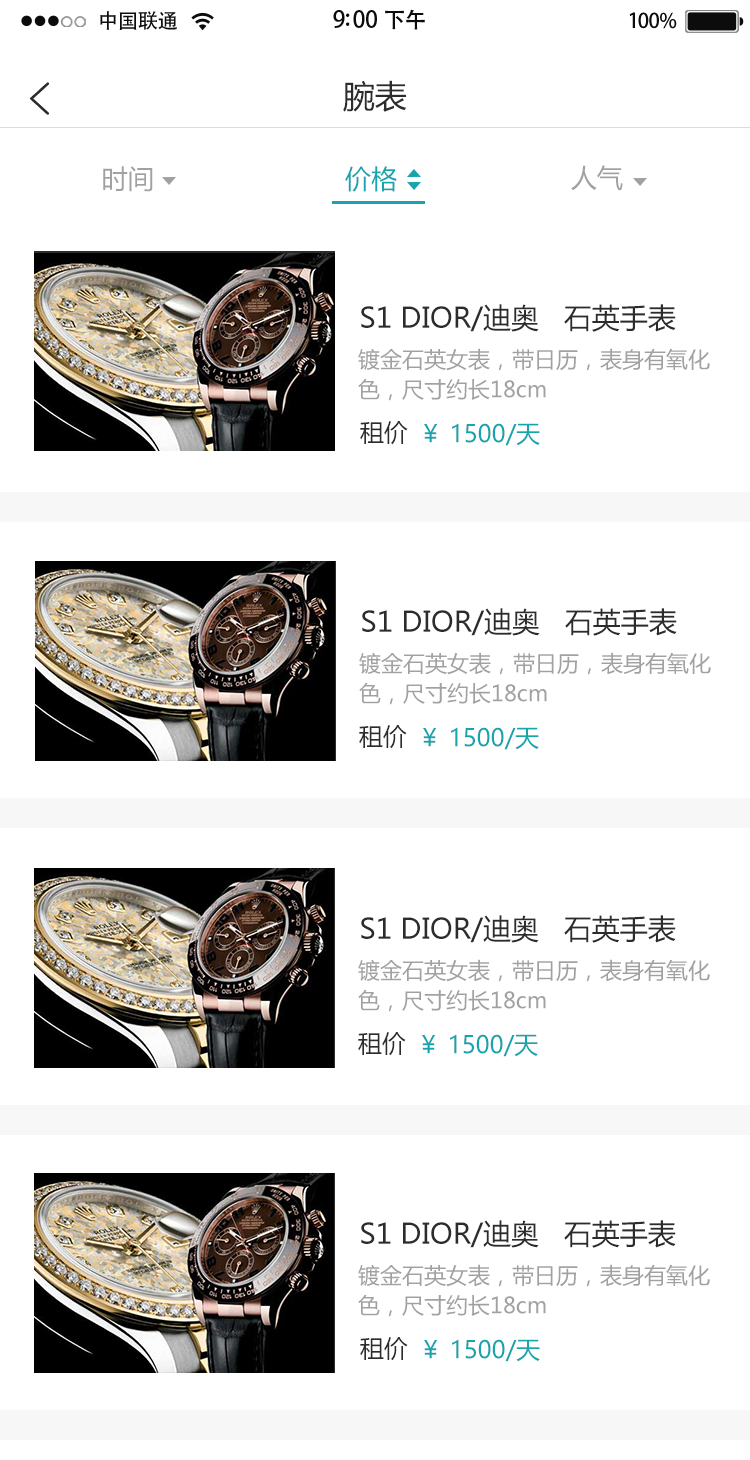
<style>
.page{position:relative;width:750px;height:1460px;background:#ffffff}
.page>*{position:absolute;margin:0}
.t1{font:20.4px "AdobeHeitiStd-Regular";letter-spacing:-0.02em;color:#000000}
.t2{font:23px "AdobeHeitiStd-Regular";letter-spacing:-0.02em;color:#000000}
.t3{font:22px "AdobeHeitiStd-Regular";letter-spacing:-0.02em;color:#000000}
.t4{font:20.4px "AdobeHeitiStd-Regular";letter-spacing:-0.02em;color:#010101}
.t5{font:32px "MicrosoftYaHei";color:#2c2c2c}
.t6{font:26px "MicrosoftYaHei";color:#a1a1a1}
.t7{font:26px "MicrosoftYaHei";color:#16a4ae}
.t8{font:28px "MicrosoftYaHei";color:#2c2c2c}
.t9{font:22px/15px "MicrosoftYaHei";color:#a1a1a1}
.t10{font:24px "MicrosoftYaHei";color:#2c2c2c}
.t11{font:24px "MicrosoftYaHei";color:#16a4ae}
</style>
<div class="page">
<p class="t1" style="left:100px;top:11px;width:77px;height:19px">中国联通</p>
<p class="t2" style="left:333px;top:9px;width:92px;height:21px">9:00 <span class="t3">下午</span></p>
<p class="t4" style="left:629px;top:12px;width:48px;height:17px">100%</p>
<p class="t5" style="left:343px;top:80px;width:64px;height:32px">腕表</p>
<p class="t6" style="left:103px;top:166px;width:50px;height:26px">时间</p>
<p class="t7" style="left:345px;top:166px;width:52px;height:26px">价格</p>
<p class="t6" style="left:571px;top:165px;width:52px;height:26px">人气</p>
<p class="t8" style="left:361px;top:304px;width:315px;height:28px">S1 DIOR/迪奥   石英手表</p>
<p class="t9" style="left:358px;top:348px;width:352px;height:53px">镀金石英女表，带日历，表身有氧化<br><br>色，尺寸约长18cm</p>
<p class="t10" style="left:360px;top:421px;width:48px;height:24px">租价</p>
<p class="t11" style="left:424px;top:423px;width:116px;height:23px">￥ 1500/天</p>
<p class="t8" style="left:362px;top:608px;width:315px;height:28px">S1 DIOR/迪奥   石英手表</p>
<p class="t9" style="left:359px;top:652px;width:352px;height:53px">镀金石英女表，带日历，表身有氧化<br><br>色，尺寸约长18cm</p>
<p class="t10" style="left:359px;top:725px;width:48px;height:24px">租价</p>
<p class="t11" style="left:423px;top:727px;width:116px;height:23px">￥ 1500/天</p>
<p class="t8" style="left:361px;top:915px;width:315px;height:28px">S1 DIOR/迪奥   石英手表</p>
<p class="t9" style="left:358px;top:959px;width:352px;height:53px">镀金石英女表，带日历，表身有氧化<br><br>色，尺寸约长18cm</p>
<p class="t10" style="left:358px;top:1032px;width:48px;height:24px">租价</p>
<p class="t11" style="left:422px;top:1034px;width:116px;height:23px">￥ 1500/天</p>
<p class="t8" style="left:361px;top:1220px;width:315px;height:28px">S1 DIOR/迪奥   石英手表</p>
<p class="t9" style="left:358px;top:1264px;width:352px;height:53px">镀金石英女表，带日历，表身有氧化<br><br>色，尺寸约长18cm</p>
<p class="t10" style="left:360px;top:1337px;width:48px;height:24px">租价</p>
<p class="t11" style="left:424px;top:1339px;width:116px;height:23px">￥ 1500/天</p>
</div>
